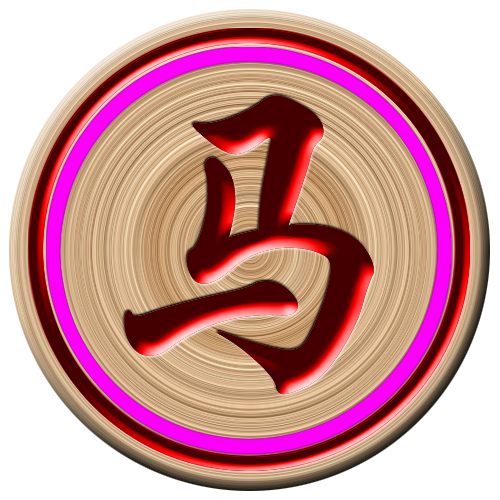
<style>
.page{position:relative;width:500px;height:500px;background:#ffffff}
.page>*{position:absolute;margin:0}
.t1{font:360px "STXingkai"}
</style>
<div class="page">
<p class="t1" style="left:124px;top:95px;width:250px;height:300px">马</p>
</div>
